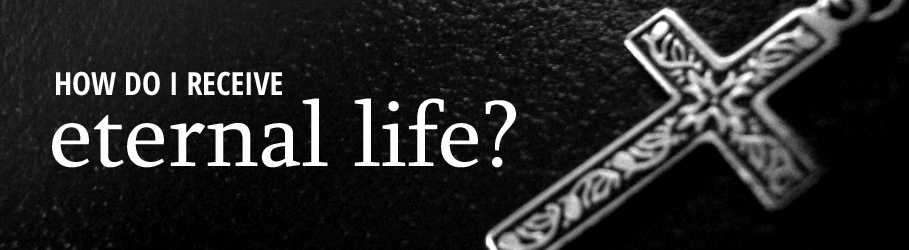
<style>
.page{position:relative;width:909px;height:250px}
.page>*{position:absolute;margin:0}
.t1{font:31.9px "OpenSans-CondensedBold";color:#ffffff}
.t2{font:95.6px "Sylfaen";color:#ffffff}
</style>
<div class="page">
<p class="t1" style="left:56px;top:71px;width:226px;height:25px">HOW DO I RECEIVE</p>
<p class="t2" style="left:52px;top:98px;width:464px;height:70px">eternal life?</p>
</div>
